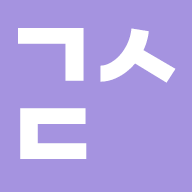
<style>
.page{position:relative;width:192px;height:192px;background:#a593e0}
.page>*{position:absolute;margin:0}
.t1{font:100px "GmarketSansTTFBold";color:#ffffff}
</style>
<div class="page">
<p class="t1" style="left:18px;top:28px;width:66px;height:53px">ㄱ</p>
<p class="t1" style="left:100px;top:28px;width:76px;height:55px">ㅅ</p>
<p class="t1" style="left:20px;top:108px;width:67px;height:51px">ㄷ</p>
</div>
